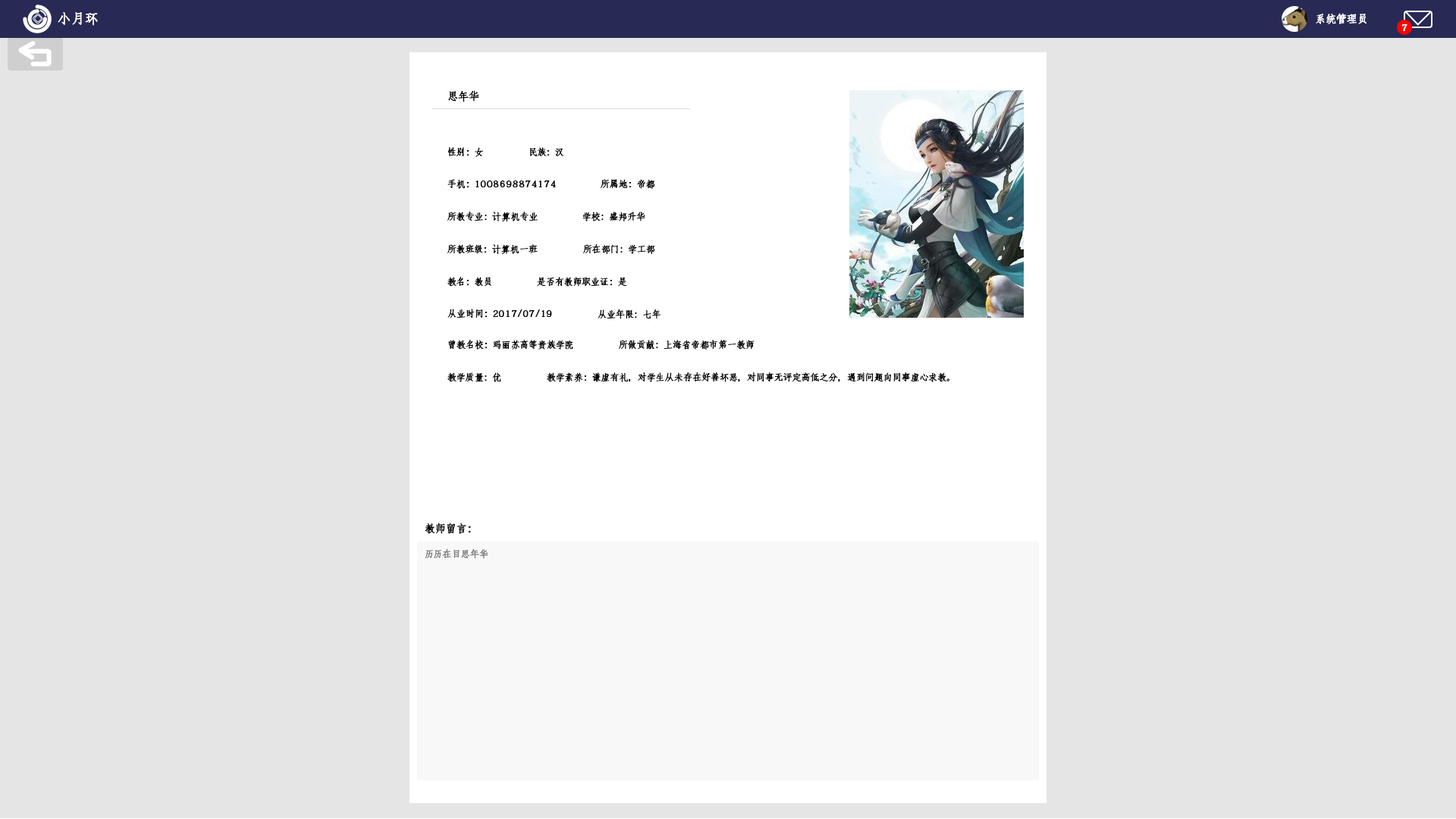
<style>
.page{position:relative;width:1456px;height:819px;background:#e5e5e5}
.page>*{position:absolute;margin:0}
.t1{font:13.4px "AdobeFangsongStd-Regular";color:#ffffff;font-weight:bold}
.t2{font:10.6px "AdobeFangsongStd-Regular";color:#ffffff;font-weight:bold}
.t3{font:9.1px "AdobeFangsongStd-Regular";color:#ffffff;font-weight:bold}
.t4{font:10.6px "AdobeFangsongStd-Regular";color:#000000;font-weight:bold}
.t5{font:9.1px "AdobeFangsongStd-Regular";color:#000000;font-weight:bold}
.t6{font:9.1px "AdobeFangsongStd-Regular";color:#7d7d7d;font-weight:bold}
</style>
<div class="page">
<p class="t1" style="left:58px;top:12px;width:40px;height:14px">小月环</p>
<p class="t2" style="left:1316px;top:13px;width:50px;height:11px">系统管理员</p>
<p class="t3" style="left:1401px;top:24px;width:6px;height:7px">7</p>
<p class="t4" style="left:448px;top:90px;width:31px;height:12px">思年华</p>
<p class="t5" style="left:448px;top:147px;width:35px;height:10px">性别：女</p>
<p class="t5" style="left:530px;top:147px;width:34px;height:10px">民族：汉</p>
<p class="t5" style="left:447px;top:179px;width:109px;height:10px">手机：1008698874174</p>
<p class="t5" style="left:601px;top:179px;width:53px;height:10px">所属地：帝都</p>
<p class="t5" style="left:447px;top:212px;width:91px;height:9px">所教专业：计算机专业</p>
<p class="t5" style="left:583px;top:212px;width:62px;height:9px">学校：盛邦升华</p>
<p class="t5" style="left:447px;top:244px;width:91px;height:10px">所教班级：计算机一班</p>
<p class="t5" style="left:583px;top:244px;width:72px;height:10px">所在部门：学工部</p>
<p class="t5" style="left:447px;top:277px;width:44px;height:10px">教名：教员</p>
<p class="t5" style="left:537px;top:277px;width:90px;height:10px">是否有教师职业证：是</p>
<p class="t5" style="left:447px;top:309px;width:105px;height:9px">从业时间：2017/07/19</p>
<p class="t5" style="left:598px;top:309px;width:62px;height:10px">从业年限：七年</p>
<p class="t5" style="left:448px;top:340px;width:125px;height:10px">曾教名校：玛丽苏高等贵族学院</p>
<p class="t5" style="left:619px;top:340px;width:136px;height:10px">所做贡献：上海省帝都市第一教师</p>
<p class="t5" style="left:447px;top:372px;width:54px;height:10px">教学质量：优</p>
<p class="t5" style="left:547px;top:372px;width:402px;height:10px">教学素养：谦虚有礼，对学生从未存在好善坏恶，对同事无评定高低之分，遇到问题向同事虚心求教。</p>
<p class="t4" style="left:425px;top:522px;width:46px;height:12px">教师留言：</p>
<p class="t6" style="left:425px;top:549px;width:63px;height:10px">历历在目思年华</p>
</div>
